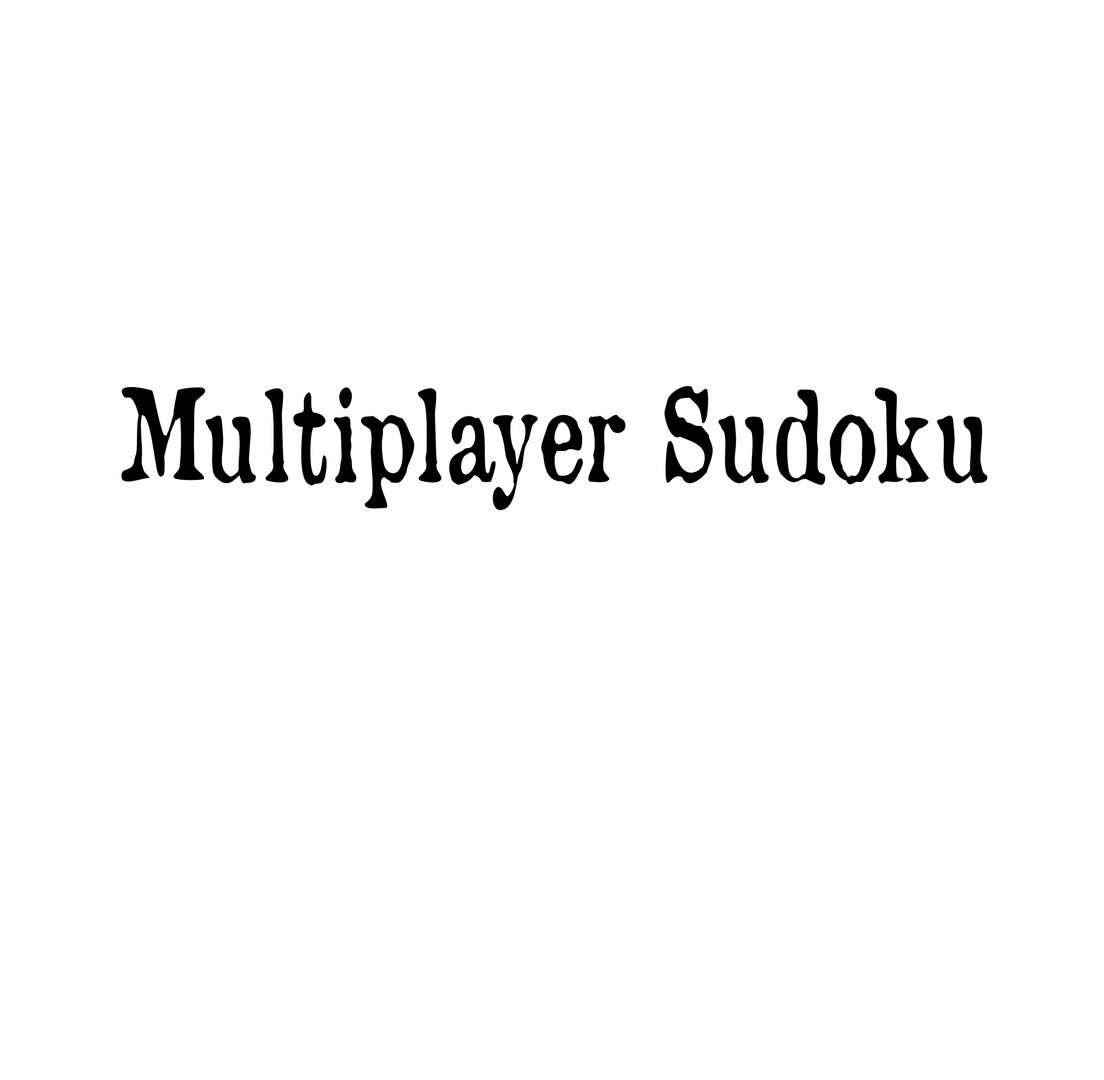
<style>
.page{position:relative;width:1104px;height:1080px;background:#ffffff}
.page>*{position:absolute;margin:0}
.t1{font:124.7px "OldNewspaperTypes";color:#000000;scale:0.75 1}
</style>
<div class="page">
<p class="t1" style="left:121px;top:386px;width:866px;height:124px">Multiplayer Sudoku</p>
</div>
